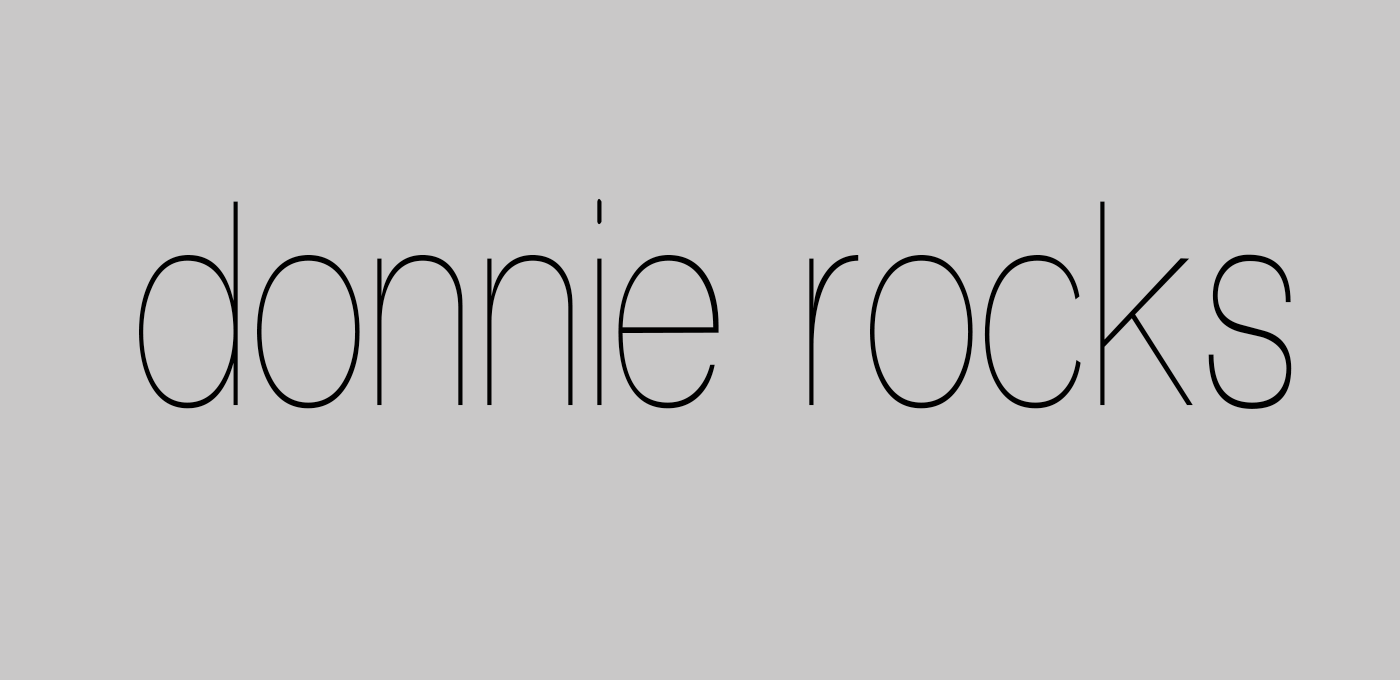
<style>
.page{position:relative;width:1400px;height:680px;background:#c9c8c8}
.page>*{position:absolute;margin:0}
.t1{font:300px "WalkwayCondensed";color:#000000}
</style>
<div class="page">
<p class="t1" style="left:139px;top:198px;width:1153px;height:211px">donnie rocks</p>
</div>
